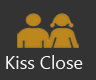
<style>
.page{position:relative;width:96px;height:80px;background:#333333}
.page>*{position:absolute;margin:0}
.t1{font:18px "SegoeUI";color:#fcfafa}
</style>
<div class="page">
<p class="t1" style="left:6px;top:55px;width:77px;height:14px">Kiss Close</p>
</div>
